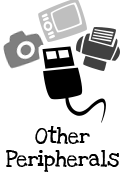
<style>
.page{position:relative;width:124px;height:172px;background:#ffffff}
.page>*{position:absolute;margin:0}
.t1{font:16px/23px "LoveYaLikeASisterSolid";color:#000000}
</style>
<div class="page">
<p class="t1" style="left:6px;top:126px;width:113px;height:46px;text-align:center">Other<br>Peripherals</p>
</div>
